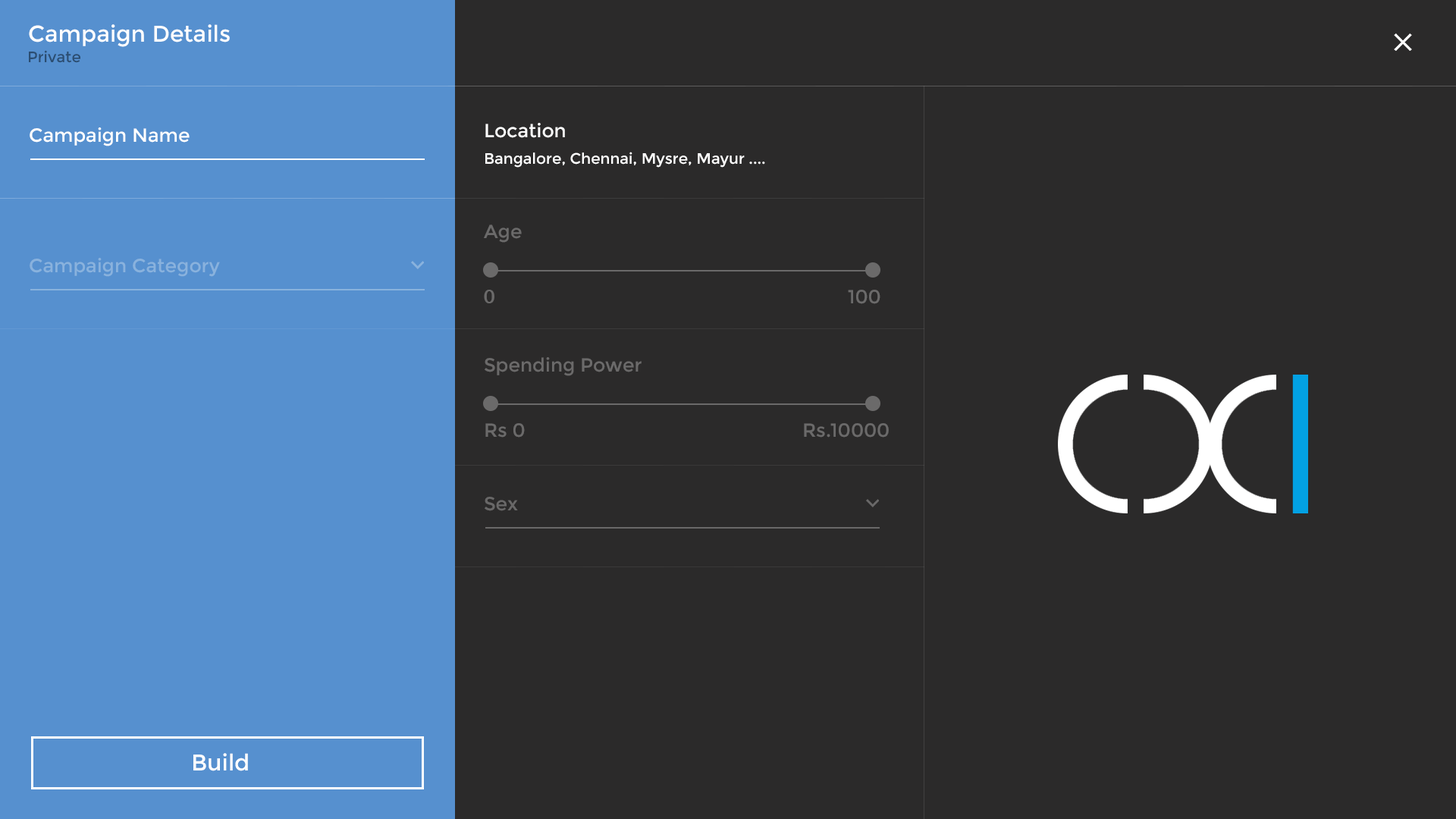
<style>
.page{position:relative;width:1456px;height:819px;background:#2b2a2a}
.page>*{position:absolute;margin:0}
.t1{font:22.7px "Montserrat-Regular";color:#ffffff}
.t2{font:15.2px "Montserrat-Regular";color:#2b4d71}
.t3{font:19px "Montserrat-Regular";color:#ffffff}
.t4{font:15.2px "Montserrat-Regular";color:#ffffff}
.t5{font:19px "Montserrat-Regular";color:#6b6a6a}
.t6{font:19px "Montserrat-Regular";color:#89b2dd}
.t7{font:19px "Lato-Bold";color:#6b6a6a}
.t8{font:19px "Montserrat-Regular";color:#696868}
</style>
<div class="page">
<p class="t1" style="left:29px;top:24px;width:201px;height:23px">Campaign Details</p>
<p class="t2" style="left:29px;top:50px;width:51px;height:13px">Private</p>
<p class="t3" style="left:485px;top:123px;width:80px;height:15px">Location</p>
<p class="t3" style="left:30px;top:127px;width:160px;height:19px">Campaign Name</p>
<p class="t4" style="left:485px;top:152px;width:280px;height:16px">Bangalore, Chennai, Mysre, Mayur ....</p>
<p class="t5" style="left:484px;top:224px;width:38px;height:19px">Age</p>
<p class="t6" style="left:30px;top:258px;width:190px;height:19px">Campaign Category</p>
<p class="t7" style="left:484px;top:290px;width:10px;height:13px">0</p>
<p class="t5" style="left:848px;top:290px;width:32px;height:14px">100</p>
<p class="t5" style="left:485px;top:357px;width:157px;height:19px">Spending Power</p>
<p class="t5" style="left:485px;top:423px;width:40px;height:15px">Rs 0</p>
<p class="t5" style="left:804px;top:423px;width:85px;height:15px">Rs.10000</p>
<p class="t8" style="left:485px;top:497px;width:33px;height:14px">Sex</p>
<p class="t1" style="left:193px;top:753px;width:55px;height:18px">Build</p>
</div>
